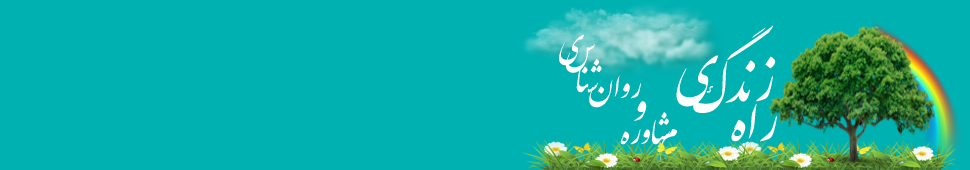
<style>
.page{position:relative;width:970px;height:170px;background:#00b1b2}
.page>*{position:absolute;margin:0}
.t1{font:60px "IranNastaliq";color:#ffffff}
.t2{font:36px "IranNastaliq";color:#ffffff}
.t3{font:48px "IranNastaliq";color:#ffffff}
</style>
<div class="page">
<p class="t1" style="left:693px;top:25px;width:80px;height:88px">گ</p>
<p class="t2" style="left:559px;top:34px;width:25px;height:32px">ي</p>
<p class="t2" style="left:565px;top:43px;width:30px;height:30px">س</p>
<p class="t2" style="left:576px;top:59px;width:26px;height:34px">شنا</p>
<p class="t1" style="left:676px;top:55px;width:43px;height:52px">ي</p>
<p class="t1" style="left:725px;top:56px;width:51px;height:47px">زند</p>
<p class="t2" style="left:589px;top:75px;width:52px;height:33px">روان</p>
<p class="t3" style="left:634px;top:101px;width:13px;height:20px">و</p>
<p class="t2" style="left:620px;top:112px;width:50px;height:33px">شاوره</p>
<p class="t1" style="left:731px;top:103px;width:46px;height:39px">راه</p>
<p class="t2" style="left:660px;top:129px;width:18px;height:36px">م</p>
</div>
